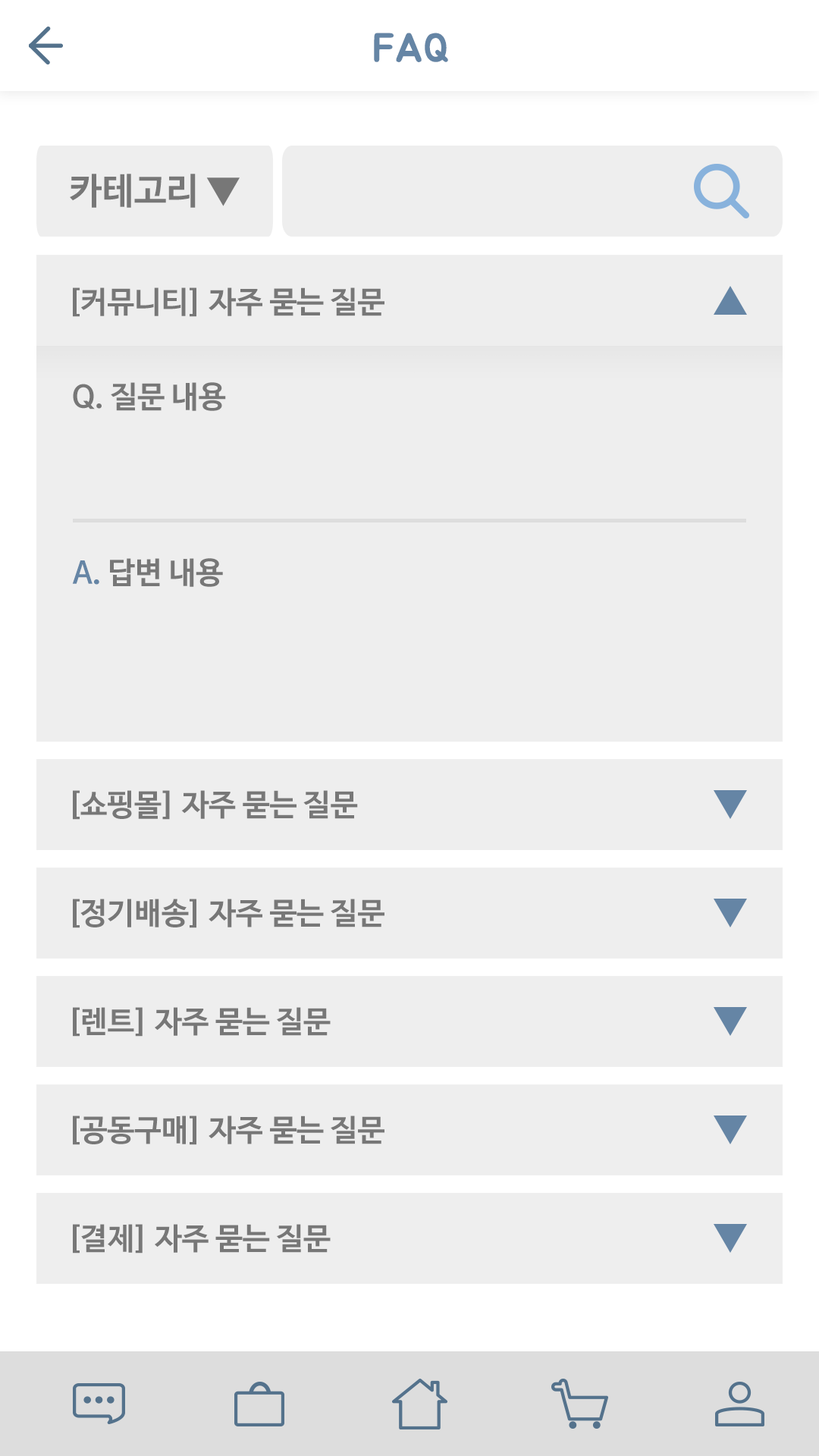
<style>
.page{position:relative;width:819px;height:1456px;background:#eeeeee}
.page>*{position:absolute;margin:0}
.t1{font:40.9px "BMJUA";color:#6585a5}
.t2{font:36.4px "NanumBarunGothicBold";color:#777777}
.t3{font:30.3px "NanumBarunGothicBold";color:#777777}
.t4{font:30.3px "NanumBarunGothicBold";color:#6585a5}
</style>
<div class="page">
<p class="t1" style="left:374px;top:33px;width:74px;height:29px">FAQ</p>
<p class="t2" style="left:70px;top:174px;width:170px;height:34px">카테고리 ▼</p>
<p class="t3" style="left:73px;top:287px;width:311px;height:30px">[커뮤니티] 자주 묻는 질문</p>
<p class="t3" style="left:73px;top:382px;width:153px;height:29px">Q. 질문 내용</p>
<p class="t3" style="left:72px;top:558px;width:151px;height:29px"><span class="t4">A.</span> 답변 내용</p>
<p class="t3" style="left:73px;top:790px;width:285px;height:30px">[쇼핑몰] 자주 묻는 질문</p>
<p class="t3" style="left:73px;top:899px;width:311px;height:29px">[정기배송] 자주 묻는 질문</p>
<p class="t3" style="left:73px;top:1007px;width:258px;height:30px">[렌트] 자주 묻는 질문</p>
<p class="t3" style="left:73px;top:1115px;width:311px;height:30px">[공동구매] 자주 묻는 질문</p>
<p class="t3" style="left:73px;top:1224px;width:258px;height:30px">[결제] 자주 묻는 질문</p>
</div>
